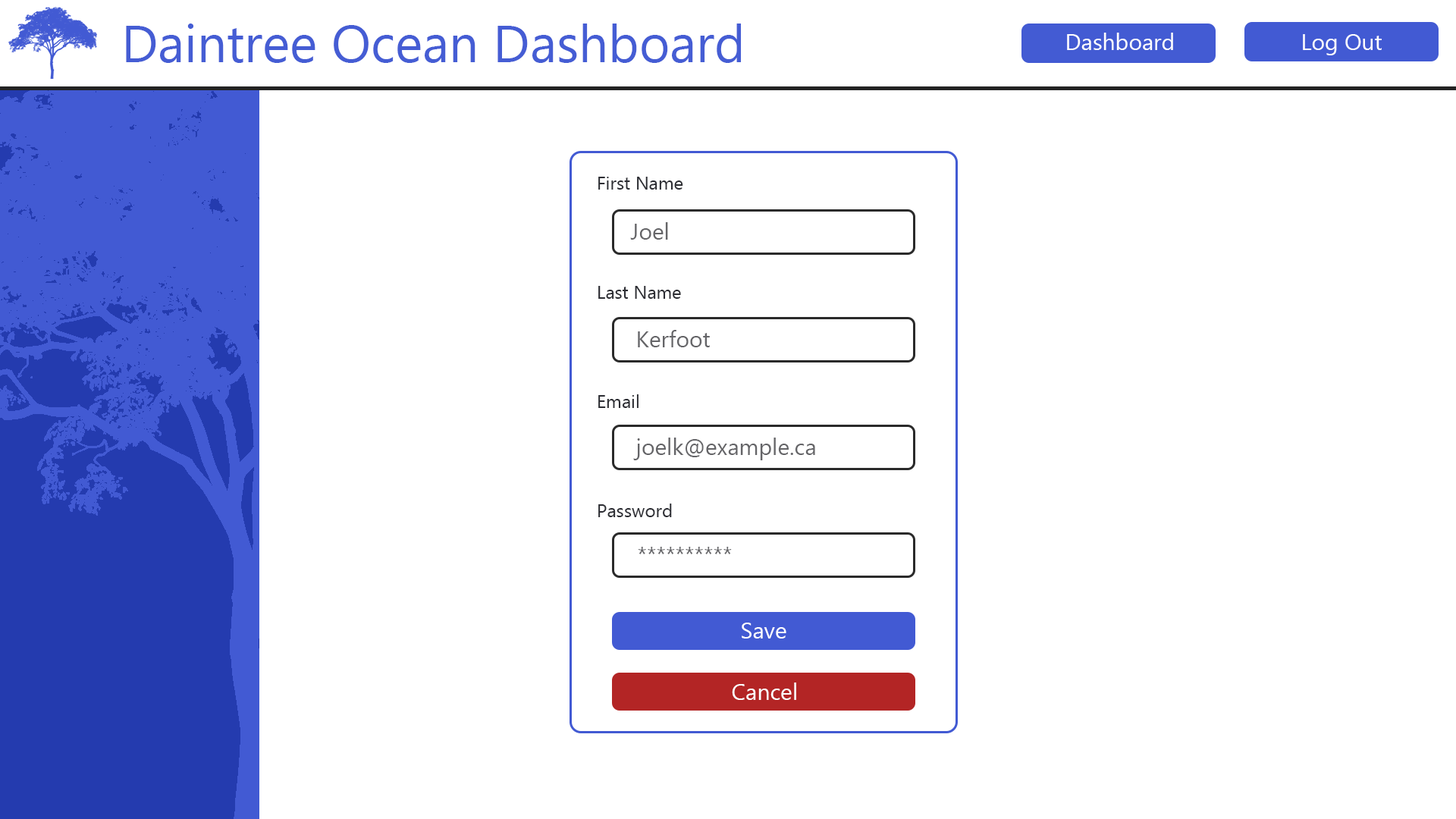
<style>
.page{position:relative;width:1456px;height:819px;background:#ffffff}
.page>*{position:absolute;margin:0}
.t1{font:52.3px "MyanmarText";color:#455dd4}
.t2{font:22.7px "MyanmarText";color:#ffffff}
.t3{font:18.2px "MyanmarText";color:#2c2d33}
.t4{font:22.7px "MyanmarText";color:#2c2d33}
.t5{font:22.7px "MyanmarText";color:#656568}
.t6{font:4.5px "MyanmarText";color:#656568}
.t7{font:4.5px "MyanmarText";color:#010101}
.t8{font:4.5px "MyanmarText";color:#000000}
</style>
<div class="page">
<p class="t1" style="left:126px;top:24px;width:615px;height:39px">Daintree Ocean Dashboard</p>
<p class="t2" style="left:1067px;top:33px;width:106px;height:17px">Dashboard</p>
<p class="t2" style="left:1303px;top:34px;width:79px;height:21px">Log Out</p>
<p class="t3" style="left:598px;top:177px;width:85px;height:340px"><span class="t4"> <br></span> First Name<br><br><br> <br><br> Last Name<br><br><br><br><br> Email<br><br><br><br><br> Password</p>
<p class="t5" style="left:630px;top:222px;width:38px;height:18px"><span class="t6"><br></span>   Joel</p>
<p class="t5" style="left:638px;top:330px;width:72px;height:17px"><span class="t6"><br></span>   Kerfoot</p>
<p class="t5" style="left:633px;top:438px;width:182px;height:22px"><span class="t7"><br></span>   joelk@example.ca</p>
<p class="t5" style="left:638px;top:547px;width:94px;height:7px"><span class="t8"><br>   </span>**********</p>
<p class="t2" style="left:742px;top:623px;width:44px;height:16px">Save</p>
<p class="t2" style="left:732px;top:682px;width:64px;height:18px">Cancel</p>
</div>
